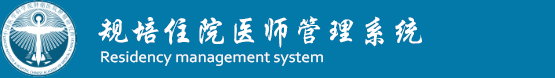
<style>
.page{position:relative;width:555px;height:78px;background:#0379a9}
.page>*{position:absolute;margin:0}
.t1{font:32.8px "CTXingKaiSJ";color:#ffffff}
.t2{font:16.1px "Corbel";color:#ffffff;scale:1.06 1}
</style>
<div class="page">
<p class="t1" style="left:98px;top:16px;width:324px;height:32px">规培住院医师管理系统</p>
<p class="t2" style="left:101px;top:50px;width:222px;height:16px">Residency management system</p>
</div>
